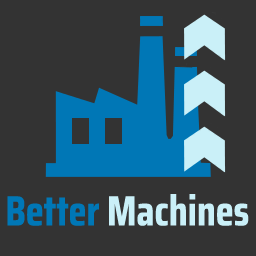
<style>
.page{position:relative;width:256px;height:256px;background:#333333}
.page>*{position:absolute;margin:0}
.t1{font:72px "SairaCondensed-Bold";color:#caf0f8}
.t2{font:72px "SairaCondensed-Bold";color:#0077b6}
</style>
<div class="page">
<p class="t1" style="left:7px;top:194px;width:242px;height:32px"><span class="t2">Better</span> Machines</p>
</div>
